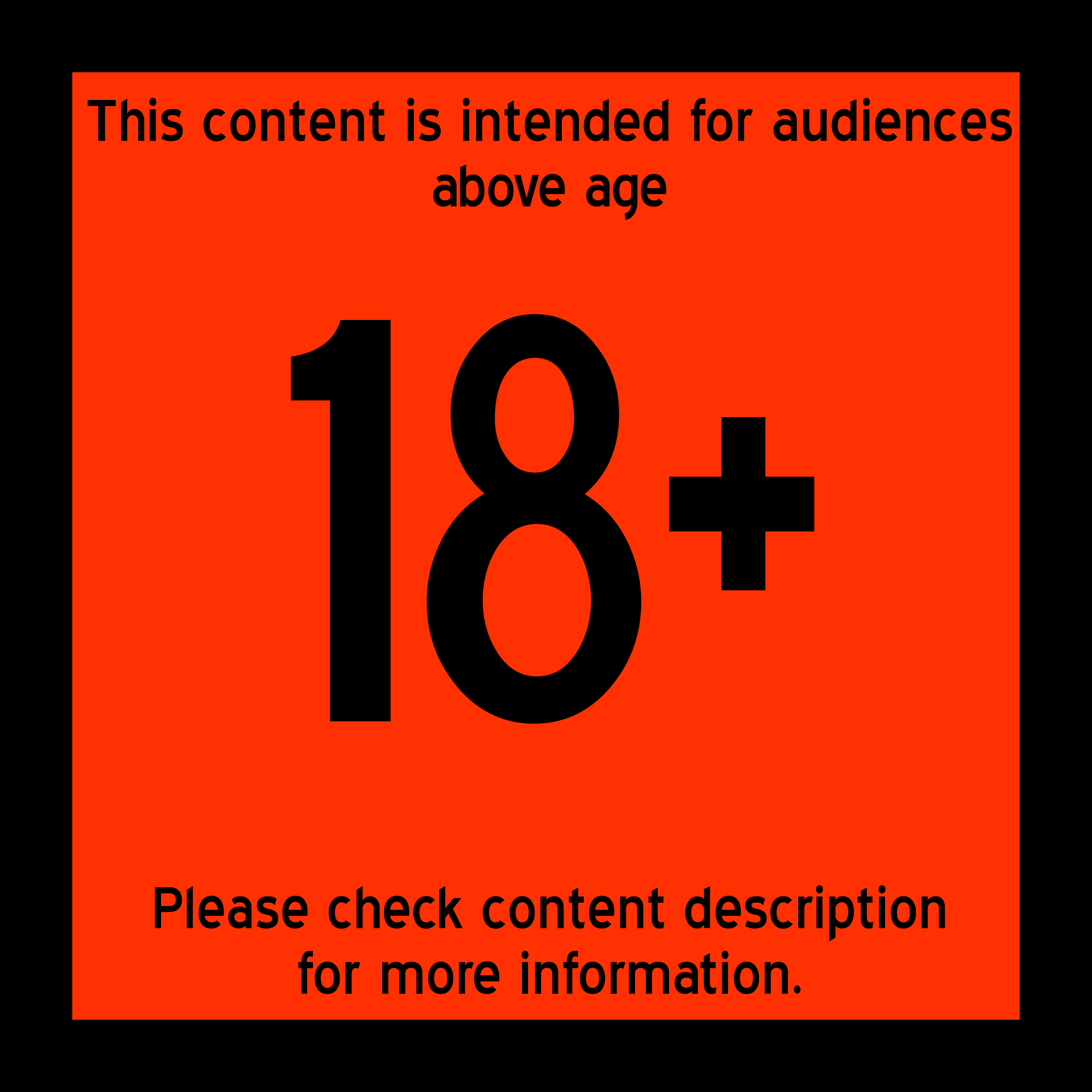
<style>
.page{position:relative;width:1092px;height:1092px;background:#ff3102}
.page>*{position:absolute;margin:0}
.t1{font:73.6px/65.5px "BlueHighway";color:#000000}
.t2{font:582.5px "BlueHighwayDType";color:#000000}
</style>
<div class="page">
<p class="t1" style="left:87px;top:98px;width:925px;height:122px;text-align:center">This content is intended for audiences<br>above age</p>
<p class="t2" style="left:288px;top:314px;width:529px;height:410px">13+</p>
<p class="t2" style="left:290px;top:314px;width:525px;height:410px">18+</p>
<p class="t2" style="left:294px;top:318px;width:517px;height:409px">16+</p>
<p class="t1" style="left:155px;top:885px;width:790px;height:109px;text-align:center">Please check content description<br>for more information.</p>
</div>
